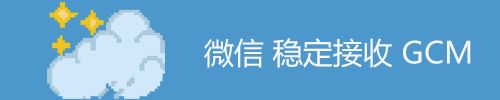
<style>
.page{position:relative;width:500px;height:100px;background:#4c98cc}
.page>*{position:absolute;margin:0}
.t1{font:30px "MicrosoftYaHei";color:#f6f8f9}
</style>
<div class="page">
<p class="t1" style="left:204px;top:38px;width:267px;height:30px">微信 稳定接收 GCM</p>
</div>
